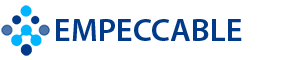
<style>
.page{position:relative;width:300px;height:60px;background:#ffffff}
.page>*{position:absolute;margin:0}
.t1{font:32.5px "MyriadPro-Semibold";color:#003a88}
</style>
<div class="page">
<p class="t1" style="left:56px;top:19px;width:186px;height:22px">EMPECCABLE</p>
</div>
